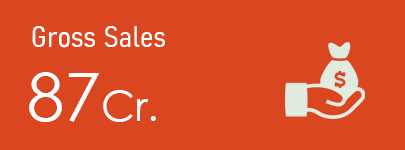
<style>
.page{position:relative;width:405px;height:150px;background:#da461f}
.page>*{position:absolute;margin:0}
.t1{font:29.2px "Bahnschrift-SemiLightSemiCondensed";color:#ffffff}
.t2{font:41.7px "CenturyGothic";color:#ffffff}
.t3{font:66.7px "CenturyGothic";color:#ffffff}
</style>
<div class="page">
<p class="t1" style="left:32px;top:26px;width:133px;height:22px">Gross Sales</p>
<p class="t2" style="left:29px;top:72px;width:127px;height:50px"><span class="t3">87</span>Cr.</p>
</div>
